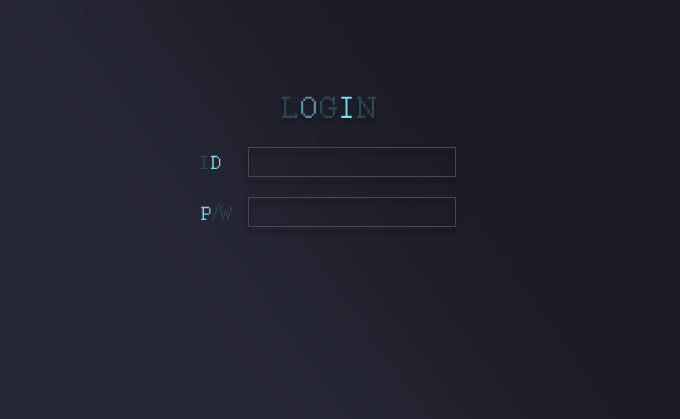
<style>
.page{position:relative;width:680px;height:419px;background:#1b1c26}
.page>*{position:absolute;margin:0}
.t1{font:34px "Courier";color:#314654}
.t2{font:34px "Courier";color:#5491a1}
.t3{font:34px "Courier";color:#77dcee}
.t4{font:21px "Courier";color:#314654}
.t5{font:21px "Courier";color:#77dcee}
.t6{font:21px "Batang";color:#314654}
</style>
<div class="page">
<p class="t1" style="left:282px;top:96px;width:94px;height:22px">L<span class="t2">O</span>G<span class="t3">I</span>N</p>
<p class="t4" style="left:200px;top:155px;width:21px;height:14px">I<span class="t5">D</span></p>
<p class="t5" style="left:201px;top:203px;width:31px;height:19px">P<span class="t6">/</span><span class="t4">W</span></p>
</div>
